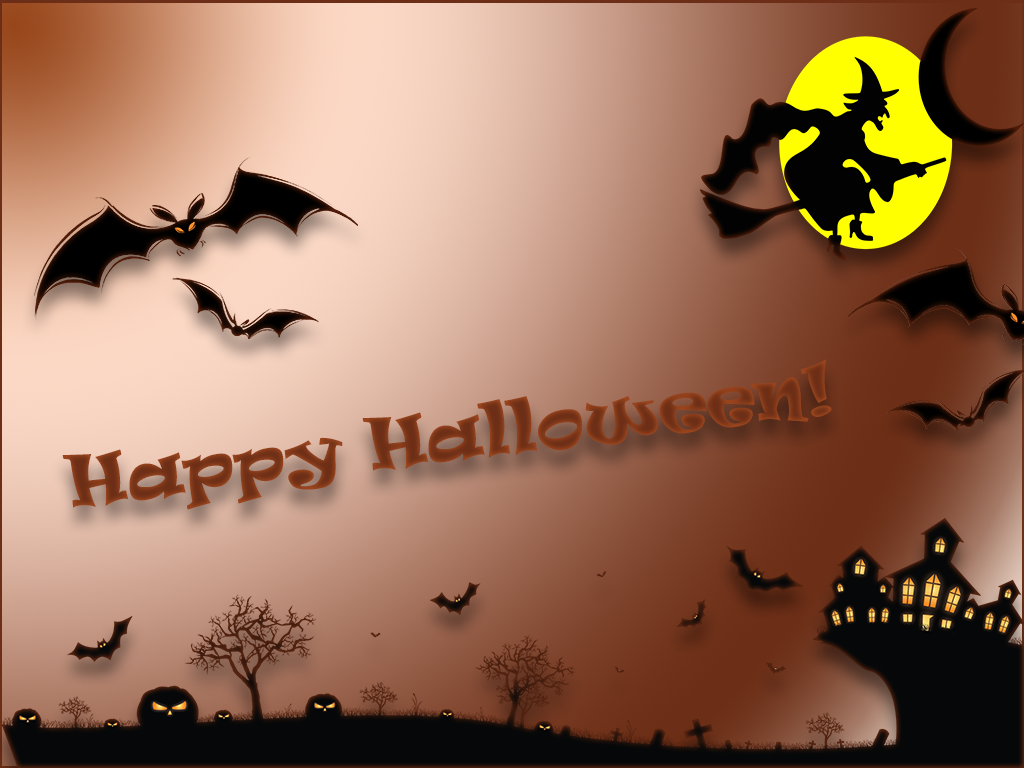
<style>
.page{position:relative;width:1024px;height:768px}
.page>*{position:absolute;margin:0}
.t1{font:66.7px "Ravie";color:#6c2e16}
</style>
<div class="page">
<p class="t1" style="left:62px;top:359px;width:770px;height:151px;rotate:-7deg">Happy Halloween!</p>
</div>
